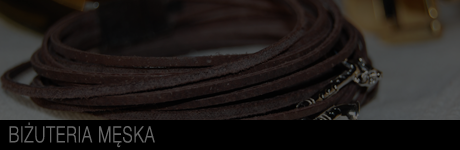
<style>
.page{position:relative;width:460px;height:150px}
.page>*{position:absolute;margin:0}
.t1{font:22.4px "HelveticaNeueCE-Light";letter-spacing:0.05em;color:#666666;scale:0.71 1}
</style>
<div class="page">
<p class="t1" style="left:9px;top:122px;width:146px;height:26px">BIŻUTERIA MĘSKA</p>
</div>
